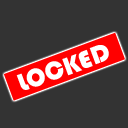
<style>
.page{position:relative;width:128px;height:128px;background:#333333}
.page>*{position:absolute;margin:0}
.t1{font:26px "Bauhaus93";color:#ffffff}
</style>
<div class="page">
<p class="t1" style="left:16px;top:45px;width:93px;height:45px;rotate:-20deg">LOCKED</p>
</div>
